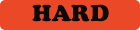
<style>
.page{position:relative;width:140px;height:30px;background:#eb4828}
.page>*{position:absolute;margin:0}
.t1{font:24px "CooperBlack";color:#0b0a0a}
</style>
<div class="page">
<p class="t1" style="left:32px;top:4px;width:77px;height:18px">HARD</p>
</div>
